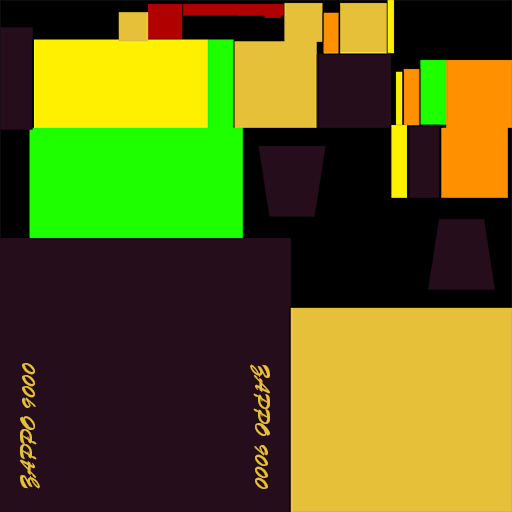
<style>
.page{position:relative;width:512px;height:512px;background:#250d1b}
.page>*{position:absolute;margin:0}
.t1{font:20.4px "BrushScriptStd";color:#e6c039}
</style>
<div class="page">
<p class="t1" style="left:20px;top:363px;width:20px;height:126px;rotate:-90deg">ZAPPO 9000</p>
<p class="t1" style="left:250px;top:364px;width:20px;height:125px;rotate:90deg">ZAPPO 9000</p>
</div>
